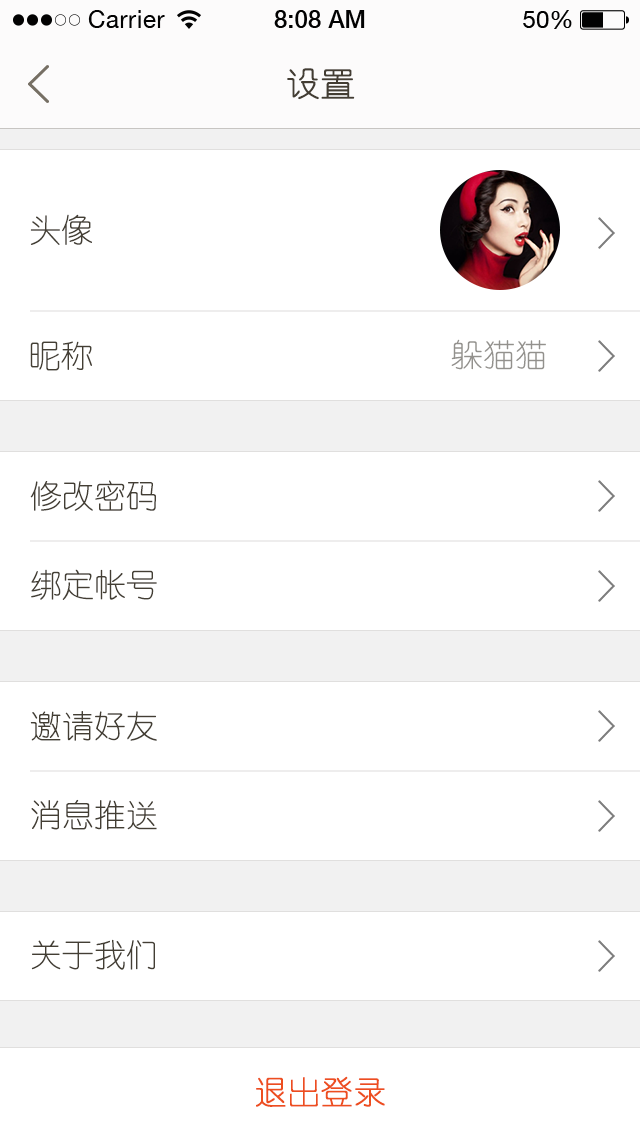
<style>
.page{position:relative;width:640px;height:1136px;background:#ffffff}
.page>*{position:absolute;margin:0}
.t1{font:34px "YouYuan";color:#433d33;text-transform:uppercase;font-weight:bold}
.t2{font:32px "YouYuan";color:#433e34}
.t3{font:32px "YouYuan";color:#93918d}
.t4{font:32px "YouYuan";color:#ed4e1f;font-weight:bold}
</style>
<div class="page">
<p class="t1" style="left:287px;top:68px;width:68px;height:32px">设置</p>
<p class="t2" style="left:30px;top:214px;width:62px;height:31px">头像</p>
<p class="t2" style="left:30px;top:341px;width:62px;height:30px">昵称</p>
<p class="t3" style="left:451px;top:339px;width:95px;height:31px">躲猫猫</p>
<p class="t2" style="left:30px;top:480px;width:126px;height:31px">修改密码</p>
<p class="t2" style="left:31px;top:569px;width:126px;height:31px">绑定帐号</p>
<p class="t2" style="left:30px;top:711px;width:127px;height:30px">邀请好友</p>
<p class="t2" style="left:31px;top:799px;width:126px;height:31px">消息推送</p>
<p class="t2" style="left:31px;top:939px;width:124px;height:31px">关于我们</p>
<p class="t4" style="left:256px;top:1076px;width:129px;height:31px">退出登录</p>
</div>
